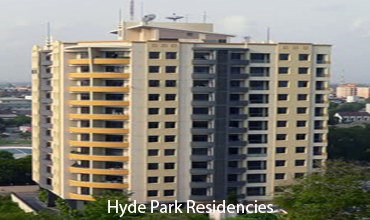
<style>
.page{position:relative;width:370px;height:220px}
.page>*{position:absolute;margin:0}
.t1{font:18px "MyriadPro-Regular";color:#fefafa}
</style>
<div class="page">
<p class="t1" style="left:108px;top:200px;width:165px;height:18px">Hyde Park Residencies</p>
</div>
